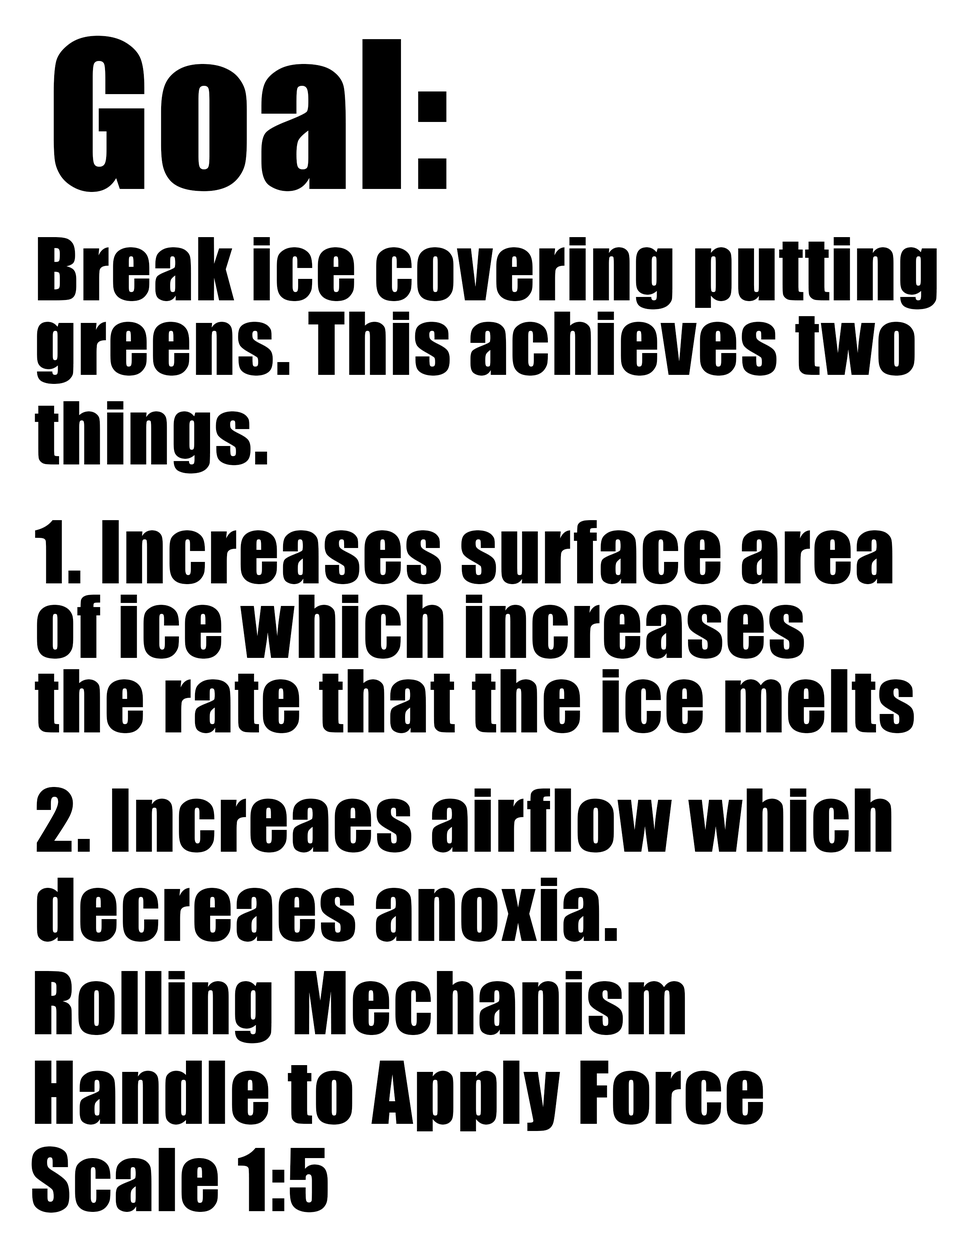
<style>
.page{position:relative;width:960px;height:1242px;background:#ffffff}
.page>*{position:absolute;margin:0}
.t1{font:189.8px "Impact";letter-spacing:0.02em;color:#000000}
.t2{font:80px/14.9px "Impact";letter-spacing:0.02em;color:#000000}
.t3{font:80px "Impact";letter-spacing:0.02em;color:#000000}
</style>
<div class="page">
<p class="t1" style="left:53px;top:36px;width:393px;height:156px">Goal:</p>
<p class="t2" style="left:35px;top:237px;width:902px;height:705px">Break ice covering putting<br><br><br><br><br>greens. This achieves two <br><br><br><br><br><br>things.<br><br><br><br><br><br><br><br>1. Increases surface area<br><br><br><br><br>of ice which increases <br><br><br><br><br>the rate that the ice melts<br><br><br><br><br><br><br><br>2. Increaes airflow which<br><br><br><br><br><br>decreaes anoxia.</p>
<p class="t2" style="left:35px;top:971px;width:728px;height:161px">Rolling Mechanism<br><br><br><br><br><br>Handle to Apply Force</p>
<p class="t3" style="left:32px;top:1147px;width:296px;height:66px">Scale 1:5</p>
</div>
